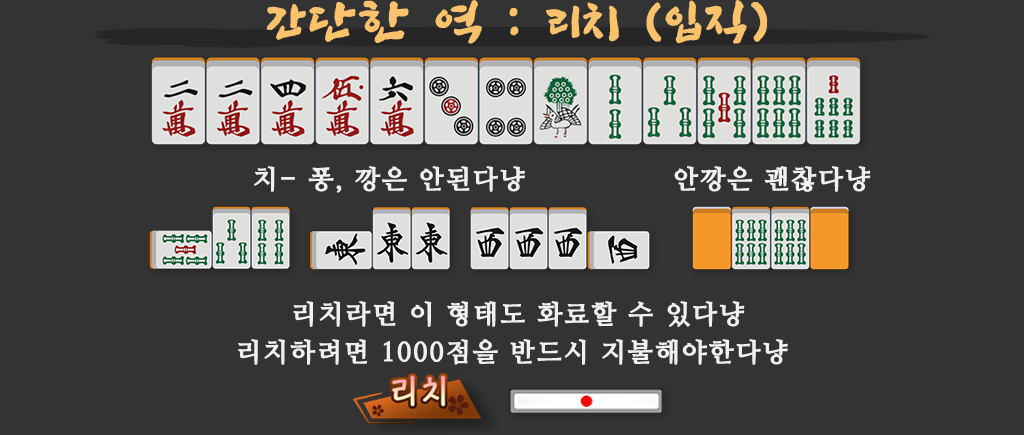
<style>
.page{position:relative;width:1024px;height:435px;background:#333333}
.page>*{position:absolute;margin:0}
.t1{font:48px "SangSangRockOTF";letter-spacing:0.06em;color:#fac26a;font-weight:bold}
.t2{font:26px "NanumMyeongjoBold";letter-spacing:0.06em;color:#f0f0ef;font-weight:bold}
</style>
<div class="page">
<p class="t1" style="left:266px;top:0px;width:502px;height:44px">간단한 역 : 리치 (입직)</p>
<p class="t2" style="left:254px;top:166px;width:271px;height:27px">치- 퐁, 깡은 안된다냥</p>
<p class="t2" style="left:674px;top:166px;width:197px;height:26px">안깡은 괜찮다냥</p>
<p class="t2" style="left:293px;top:301px;width:452px;height:26px">리치라면 이 형태도 화료할 수 있다냥</p>
<p class="t2" style="left:238px;top:339px;width:550px;height:26px">리치하려면 1000점을 반드시 지불해야한다냥</p>
</div>
